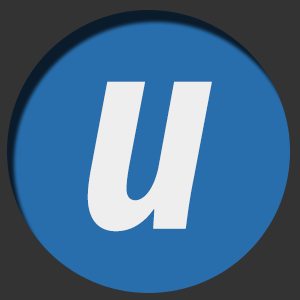
<style>
.page{position:relative;width:300px;height:300px;background:#286ead}
.page>*{position:absolute;margin:0}
.t1{font:300px "MyriadPro-BoldCondIt";color:#edeeed}
</style>
<div class="page">
<p class="t1" style="left:87px;top:81px;width:125px;height:151px">u</p>
</div>
